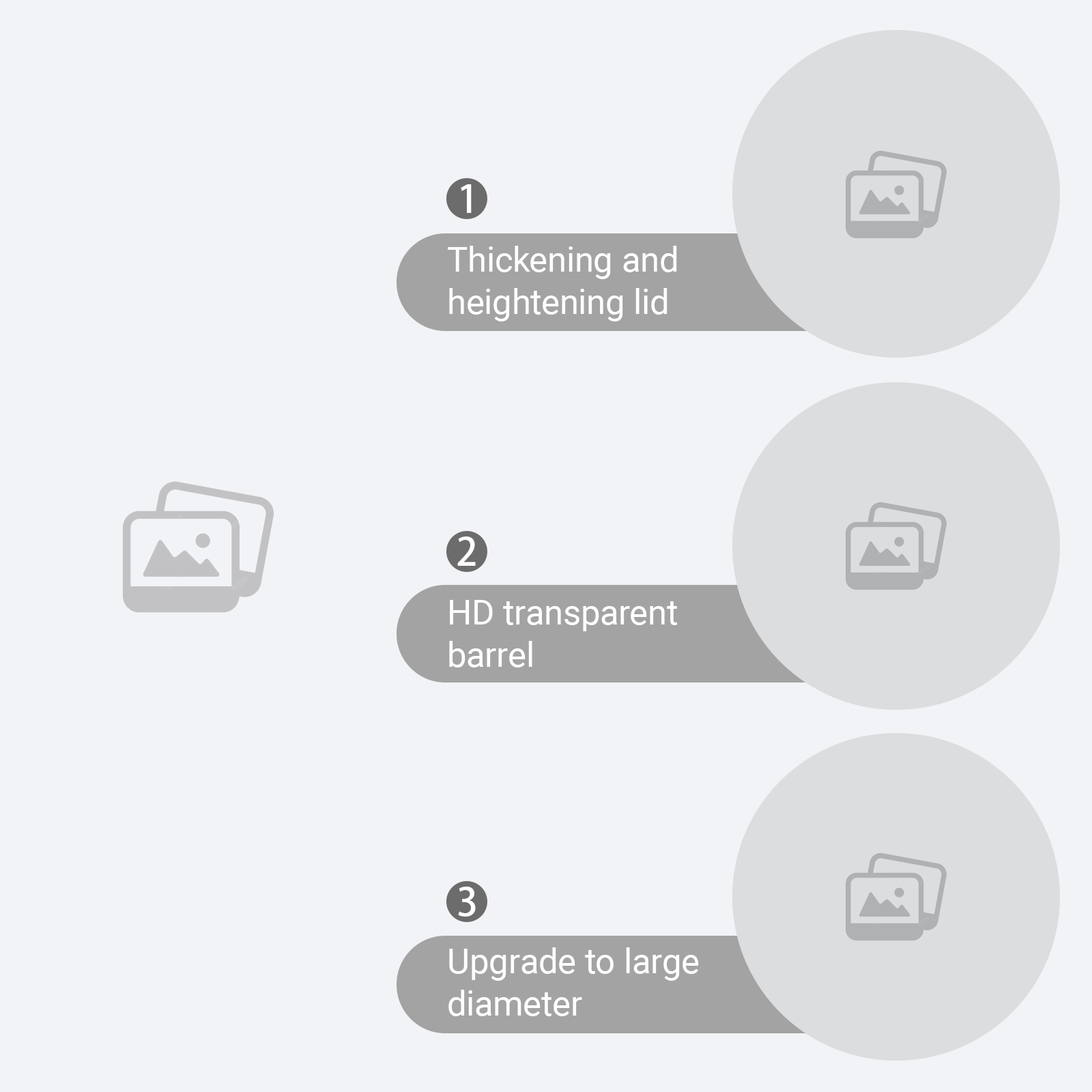
<style>
.page{position:relative;width:1092px;height:1092px;background:#f2f3f6}
.page>*{position:absolute;margin:0}
.t1{font:38.2px "AdobeHeitiStd-Regular";color:#ffffff}
.t2{font:34.9px "Roboto-Regular";color:#ffffff}
</style>
<div class="page">
<p class="t1" style="left:461px;top:184px;width:11px;height:29px">1</p>
<p class="t2" style="left:448px;top:246px;width:229px;height:75px">Thickening and heightening lid</p>
<p class="t1" style="left:457px;top:536px;width:19px;height:30px">2</p>
<p class="t2" style="left:449px;top:600px;width:228px;height:67px">HD transparent barrel</p>
<p class="t1" style="left:458px;top:887px;width:18px;height:30px">3</p>
<p class="t2" style="left:448px;top:947px;width:251px;height:69px">Upgrade to large diameter</p>
</div>
